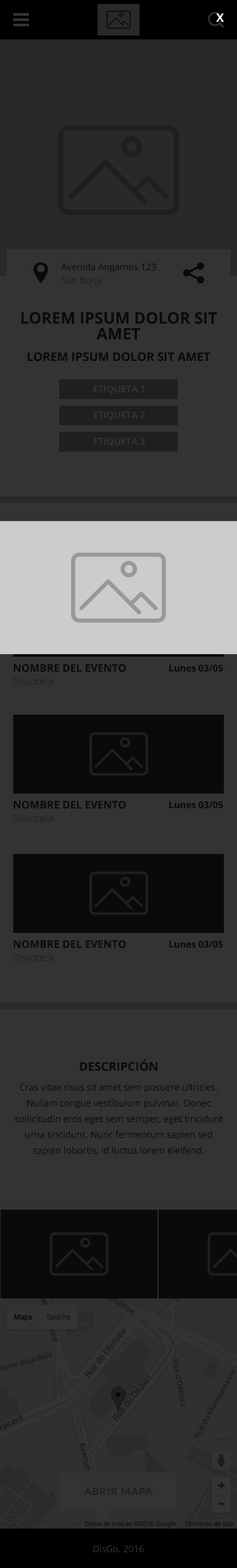
<style>
.page{position:relative;width:237px;height:1568px;background:#333333}
.page>*{position:absolute;margin:0}
.t1{font:11.8px "OpenSans-Bold";color:#ffffff}
.t2{font:9.2px/13.2px "OpenSans"}
.t3{font:15.8px/15.8px "OpenSans-Bold";color:#0a0a0a;text-transform:uppercase}
.t4{font:11.8px "OpenSans-Bold";color:#0a0a0a;text-transform:uppercase}
.t5{font:9.2px "OpenSans-Bold";color:#333333;text-transform:uppercase}
.t6{font:10.5px "OpenSans-Bold";color:#0a0a0a;text-transform:uppercase}
.t7{font:9.2px "OpenSans-Bold";color:#0a0a0a}
.t8{font:9.2px "OpenSans";color:#1f1f1f}
.t9{font:9.2px/15.8px "OpenSans";color:#0a0a0a}
.t10{font:9.2px "OpenSans";color:#333333}
</style>
<div class="page">
<p class="t1" style="left:216px;top:13px;width:8px;height:9px">X</p>
<p class="t2" style="left:61px;top:263px;width:95px;height:23px">Avenida Angamos 123<br>San Borja</p>
<p class="t3" style="left:21px;top:312px;width:196px;height:28px;text-align:center">Lorem ipsum dolor sit amet</p>
<p class="t4" style="left:28px;top:352px;width:182px;height:10px">Lorem ipsum dolor sit amet</p>
<p class="t5" style="left:93px;top:385px;width:51px;height:9px">Etiqueta 1</p>
<p class="t5" style="left:93px;top:412px;width:52px;height:8px">Etiqueta 2</p>
<p class="t5" style="left:93px;top:438px;width:52px;height:8px">Etiqueta 3</p>
<p class="t6" style="left:14px;top:664px;width:112px;height:8px">Nombre del evento</p>
<p class="t7" style="left:169px;top:665px;width:54px;height:7px">Lunes 03/05</p>
<p class="t8" style="left:13px;top:678px;width:40px;height:7px">Discoteca</p>
<p class="t6" style="left:14px;top:801px;width:112px;height:8px">Nombre del evento</p>
<p class="t7" style="left:169px;top:801px;width:54px;height:8px">Lunes 03/05</p>
<p class="t8" style="left:13px;top:815px;width:40px;height:7px">Discoteca</p>
<p class="t6" style="left:14px;top:940px;width:112px;height:8px">Nombre del evento</p>
<p class="t7" style="left:169px;top:941px;width:54px;height:7px">Lunes 03/05</p>
<p class="t8" style="left:13px;top:954px;width:40px;height:7px">Discoteca</p>
<p class="t4" style="left:80px;top:1059px;width:77px;height:12px">Descripción</p>
<p class="t9" style="left:15px;top:1083px;width:208px;height:73px;text-align:center">Cras vitae risus sit amet sem posuere ultricies. Nullam congue vestibulum pulvinar. Donec sollicitudin eros eget sem semper, eget tincidunt urna tincidunt. Nunc fermentum sapien sed sapien lobortis, id luctus lorem eleifend.</p>
<p class="t10" style="left:93px;top:1545px;width:51px;height:8px">DisGo. 2016</p>
</div>
